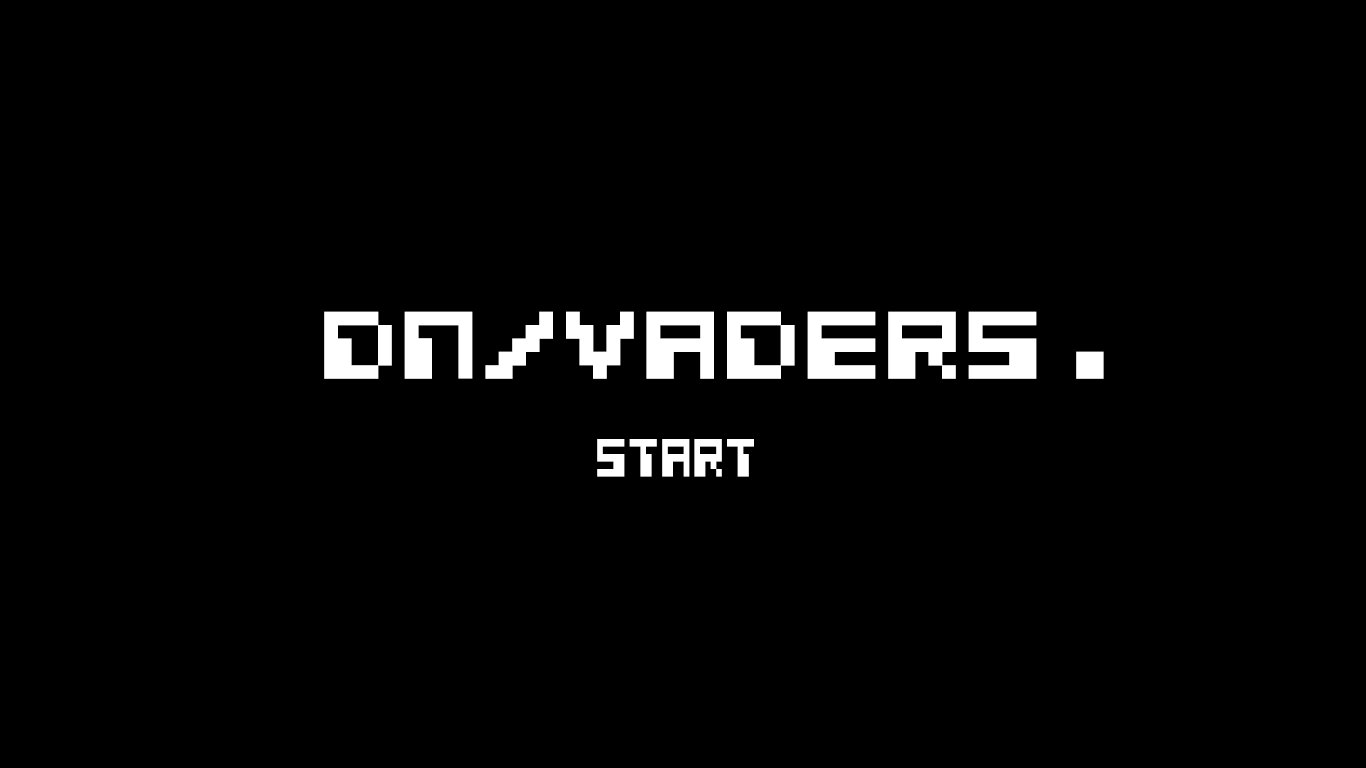
<style>
.page{position:relative;width:1366px;height:768px;background:#000000}
.page>*{position:absolute;margin:0}
.t1{font:106.8px "CosmicAlien";color:#ffffff}
.t2{font:60px "CosmicAlien";color:#ffffff;scale:0.72 1}
</style>
<div class="page">
<p class="t1" style="left:324px;top:311px;width:780px;height:68px">DN/vaders.</p>
<p class="t2" style="left:597px;top:439px;width:157px;height:38px">start</p>
</div>
